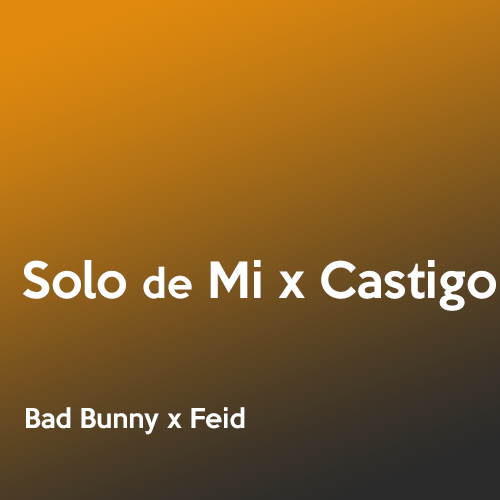
<style>
.page{position:relative;width:500px;height:500px}
.page>*{position:absolute;margin:0}
.t1{font:45.8px "KeepCalm-Medium";color:#ffffff}
.t2{font:37.5px "KeepCalm-Medium";color:#ffffff}
.t3{font:25px "KeepCalm-Medium";color:#ffffff}
</style>
<div class="page">
<p class="t1" style="left:23px;top:260px;width:473px;height:51px">Solo <span class="t2">de</span> Mi x Castigo</p>
<p class="t3" style="left:26px;top:407px;width:219px;height:28px">Bad Bunny x Feid</p>
</div>
